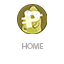
<style>
.page{position:relative;width:64px;height:64px;background:#ffffff}
.page>*{position:absolute;margin:0}
.t1{font:8px "MyriadPro-Regular";color:#b0b0b0}
</style>
<div class="page">
<p class="t1" style="left:22px;top:43px;width:22px;height:7px">HOME</p>
</div>
